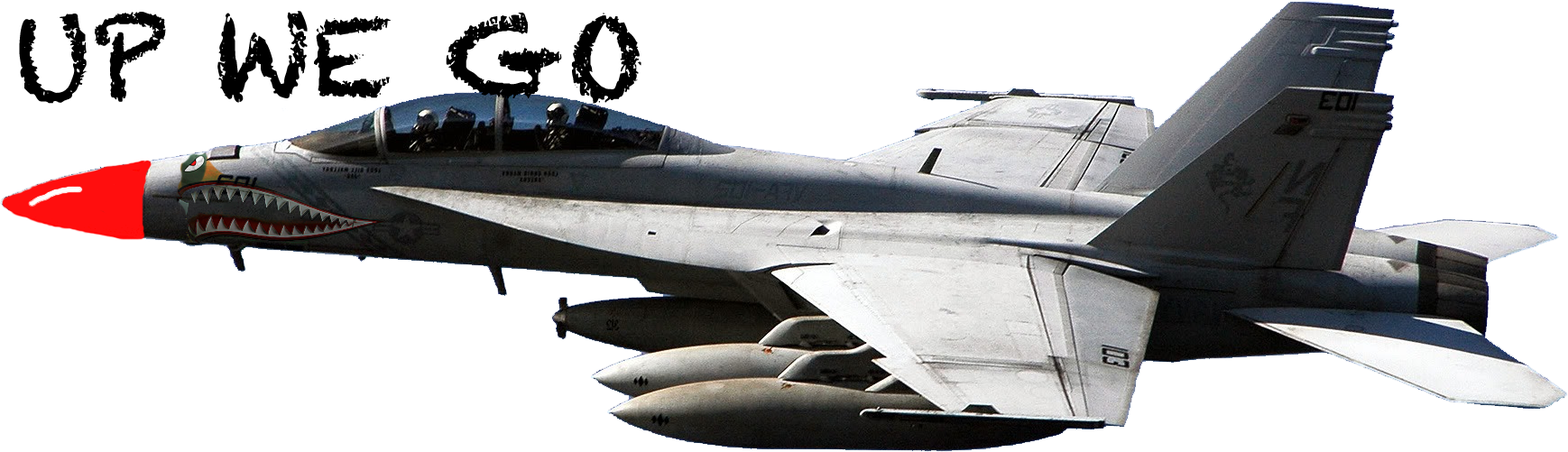
<style>
.page{position:relative;width:1568px;height:452px;background:#ffffff}
.page>*{position:absolute;margin:0}
.t1{font:108.3px "Chalkduster";color:#000000}
</style>
<div class="page">
<p class="t1" style="left:19px;top:11px;width:622px;height:93px">UP WE GO</p>
</div>
